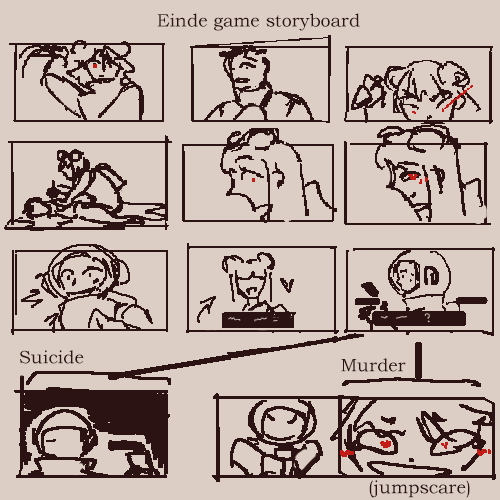
<style>
.page{position:relative;width:500px;height:500px;background:#dccec5}
.page>*{position:absolute;margin:0}
.t1{font:18px "BookmanOldStyle";color:#2c1313}
</style>
<div class="page">
<p class="t1" style="left:157px;top:13px;width:203px;height:18px">Einde game storyboard</p>
<p class="t1" style="left:20px;top:350px;width:64px;height:14px">Suicide</p>
<p class="t1" style="left:341px;top:358px;width:65px;height:14px">Murder</p>
<p class="t1" style="left:369px;top:480px;width:101px;height:18px">(jumpscare)</p>
</div>
